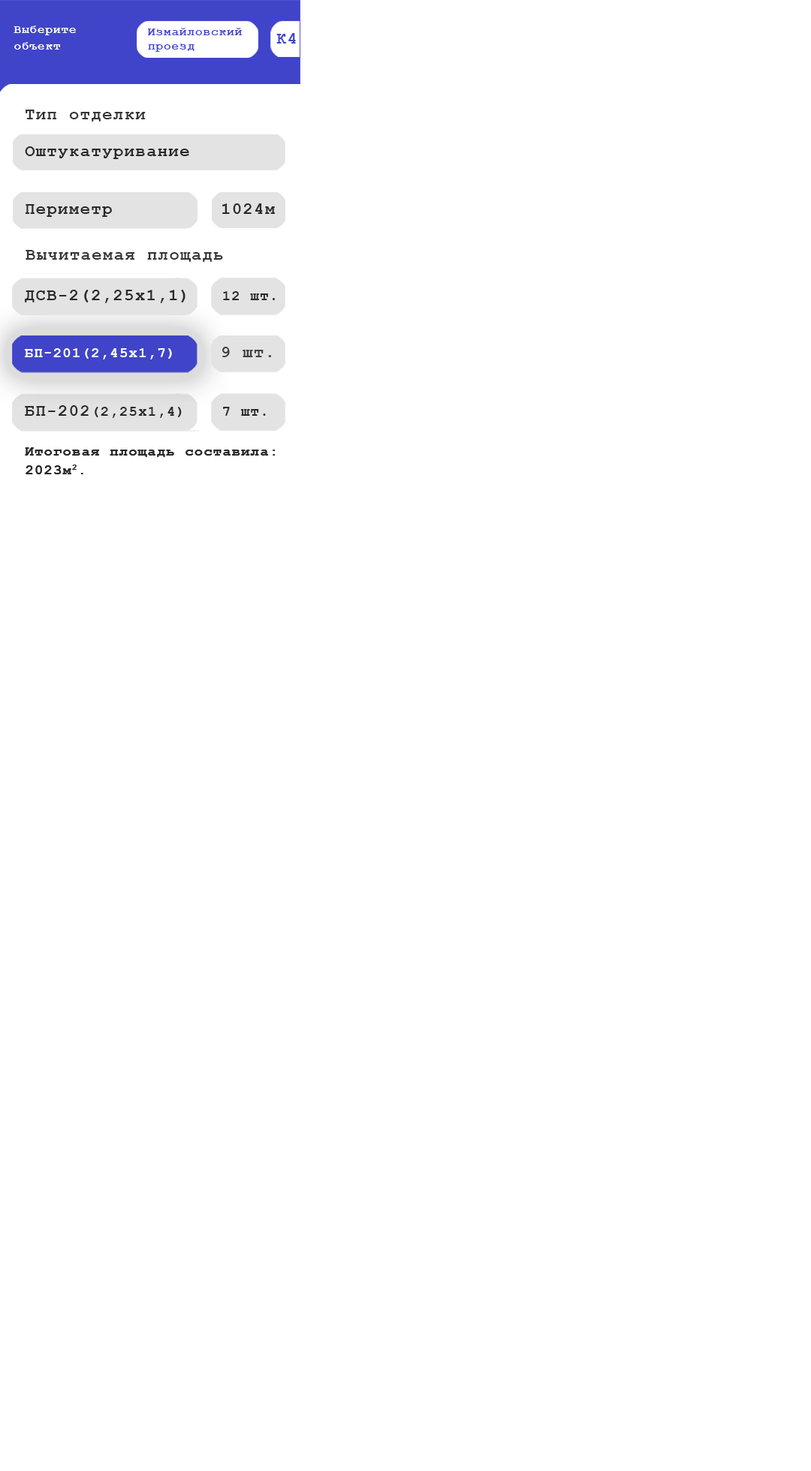
<style>
.page{position:relative;width:811px;height:1471px;background:#ffffff}
.page>*{position:absolute;margin:0}
.t1{font:11.7px/16.4px "CourierNewPS-BoldMT";letter-spacing:0.075em;color:#ffffff}
.t2{font:11.7px/14px "CourierNewPS-BoldMT";letter-spacing:0.075em;color:#4044c9}
.t3{font:16.4px "CourierNewPS-BoldMT";letter-spacing:0.075em;color:#4044c9}
.t4{font:16.4px "CourierNewPS-BoldMT";letter-spacing:0.075em;color:#353535}
.t5{font:16.4px "CourierNewPS-BoldMT";letter-spacing:0.075em;color:#292929}
.t6{font:14px "CourierNewPS-BoldMT";letter-spacing:0.075em;color:#292929}
.t7{font:14px "CourierNewPS-BoldMT";letter-spacing:0.075em;color:#ffffff}
.t8{font:16.4px "CourierNewPS-BoldMT";letter-spacing:0.075em;color:#424242}
.t9{font:3.3px/9.2px "CourierNewPS-BoldMT";letter-spacing:0.075em;color:#292929}
</style>
<div class="page">
<p class="t1" style="left:14px;top:26px;width:62px;height:24px">Выберите<br>объект</p>
<p class="t2" style="left:148px;top:28px;width:94px;height:24px">Измайловский<br>проезд</p>
<p class="t3" style="left:276px;top:33px;width:20px;height:11px">К4</p>
<p class="t4" style="left:26px;top:110px;width:120px;height:12px">Тип отделки</p>
<p class="t5" style="left:25px;top:146px;width:164px;height:13px">Оштукатуривание</p>
<p class="t5" style="left:25px;top:204px;width:87px;height:13px">Периметр</p>
<p class="t5" style="left:222px;top:203px;width:53px;height:11px">1024м</p>
<p class="t4" style="left:26px;top:250px;width:197px;height:12px">Вычитаемая площадь</p>
<p class="t5" style="left:25px;top:290px;width:160px;height:13px">ДСВ-2(2,25х1,1)</p>
<p class="t6" style="left:223px;top:291px;width:52px;height:9px">12 шт.</p>
<p class="t7" style="left:25px;top:348px;width:147px;height:12px">БП-201(2,45х1,7)</p>
<p class="t8" style="left:222px;top:347px;width:50px;height:10px">9 шт.</p>
<p class="t6" style="left:25px;top:405px;width:157px;height:13px"><span class="t5">БП-202</span>(2,25х1,4)</p>
<p class="t6" style="left:223px;top:407px;width:43px;height:9px">7 шт.</p>
<p class="t9" style="left:25px;top:447px;width:250px;height:27px">Итоговая площадь составила:<br><br>2023м2.</p>
<p class="t9" style="left:25px;top:447px;width:250px;height:27px">Итоговая площадь составила:<br><br>2023м2.</p>
</div>
